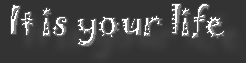
<style>
.page{position:relative;width:246px;height:63px;background:#333333}
.page>*{position:absolute;margin:0}
.t1{font:36px "Jokerman-Regular";letter-spacing:-0.01em}
</style>
<div class="page">
<p class="t1" style="left:11px;top:4px;width:213px;height:42px">It is your life</p>
</div>
